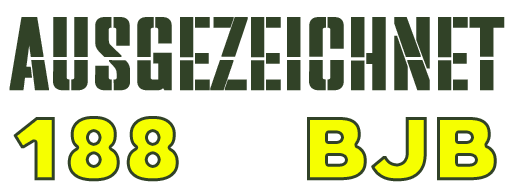
<style>
.page{position:relative;width:512px;height:196px;background:#ffffff}
.page>*{position:absolute;margin:0}
.t1{font:96px "PFVenue-Stencil";color:#314227;font-weight:bold}
.t2{font:96px "Arboria-Black";color:#f6ff00;font-weight:bold}
</style>
<div class="page">
<p class="t1" style="left:9px;top:17px;width:496px;height:74px">Ausgezeichnet</p>
<p class="t2" style="left:13px;top:116px;width:484px;height:66px">188     BJB</p>
</div>
